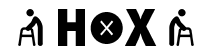
<style>
.page{position:relative;width:204px;height:54px;background:#ffffff}
.page>*{position:absolute;margin:0}
.t1{font:53px "IntroCondBlackFree";color:#000000}
</style>
<div class="page">
<p class="t1" style="left:58px;top:9px;width:99px;height:37px">НЁХ</p>
</div>
